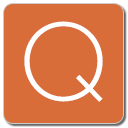
<style>
.page{position:relative;width:128px;height:128px;background:#d86d39}
.page>*{position:absolute;margin:0}
.t1{font:110px "MuseoSans-100";letter-spacing:0.1em;color:#ffffff;text-transform:uppercase}
</style>
<div class="page">
<p class="t1" style="left:24px;top:21px;width:79px;height:81px">q</p>
</div>
